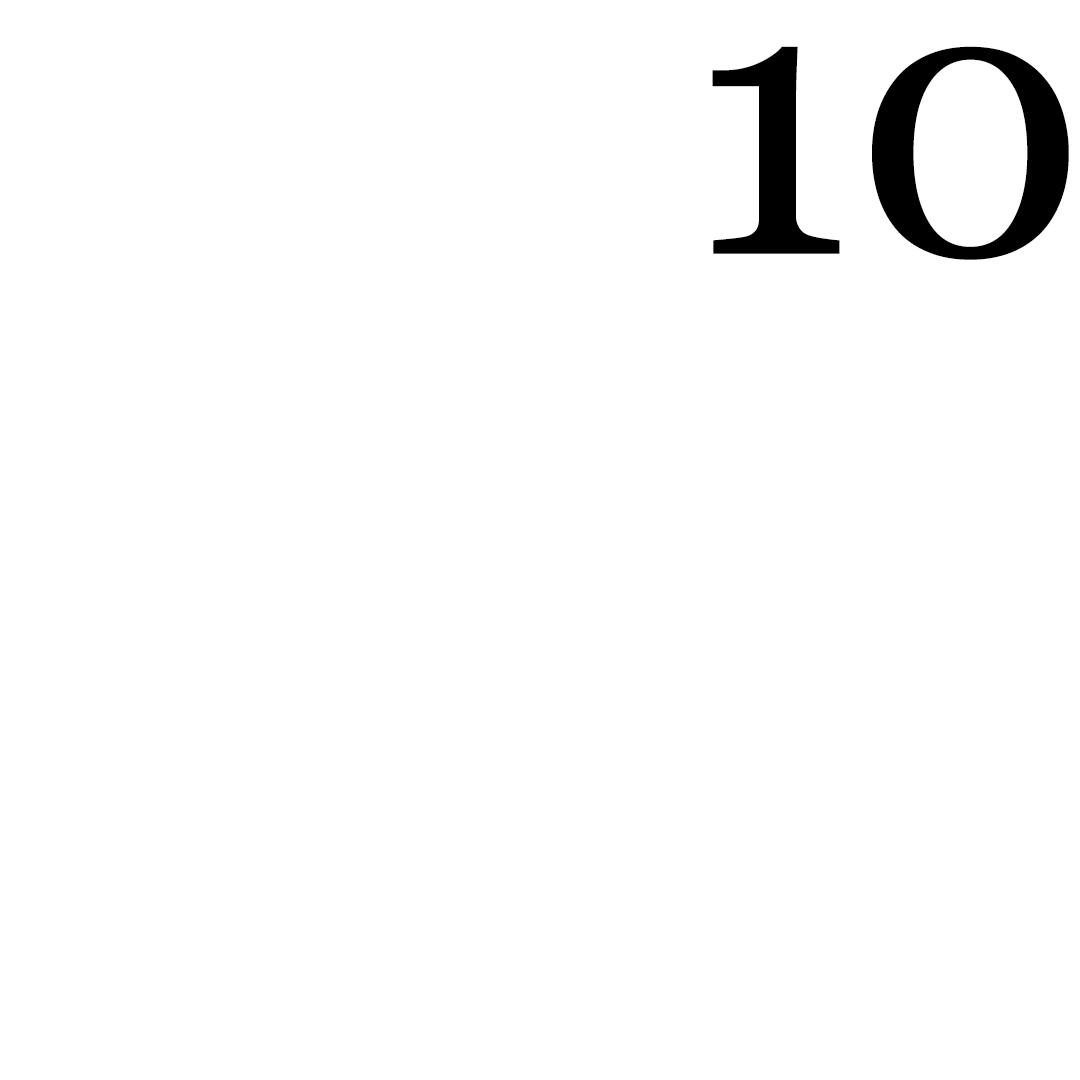
<style>
.page{position:relative;width:1080px;height:1080px;background:#ffffff}
.page>*{position:absolute;margin:0}
.t1{font:383.3px "Georgia";color:#000000}
</style>
<div class="page">
<p class="t1" style="left:712px;top:46px;width:357px;height:214px">10</p>
</div>
